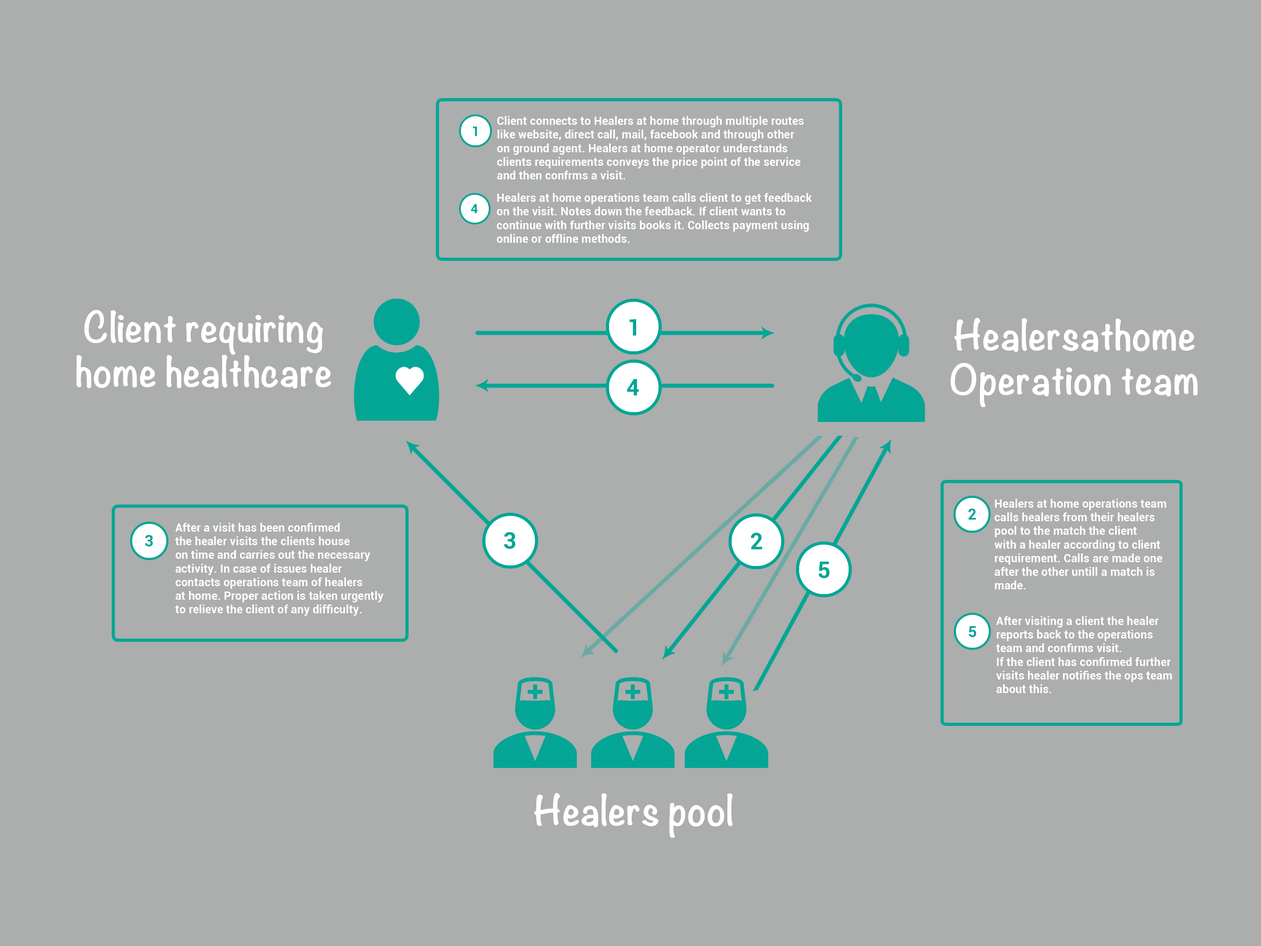
<style>
.page{position:relative;width:1261px;height:946px;background:#acadad}
.page>*{position:absolute;margin:0}
.t1{font:11.3px "Roboto-Bold";letter-spacing:0.01em;color:#ffffff}
.t2{font:37px "Noteworthy-Bold";letter-spacing:0.01em;color:#ffffff}
</style>
<div class="page">
<p class="t1" style="left:497px;top:116px;width:307px;height:63px">Client connects to Healers at home through multiple routes<br>like website, direct call, mail, facebook and through other <br>on ground agent. Healers at home operator understands <br>clients requirements conveys the price point of the service<br>and then confrms a visit.</p>
<p class="t1" style="left:497px;top:193px;width:315px;height:50px">Healers at home operations team calls client to get feedback <br>on the visit. Notes down the feedback. If client wants to <br>continue with further visits books it. Collects payment using <br>online or offline methods.</p>
<p class="t2" style="left:76px;top:310px;width:255px;height:78px;text-align:center">Client requiring<br>home healthcare</p>
<p class="t2" style="left:950px;top:318px;width:248px;height:89px;text-align:center">Healersathome<br>Operation team</p>
<p class="t1" style="left:994px;top:499px;width:172px;height:90px">Healers at home operations team<br>calls healers from their healers<br>pool to the match the client<br>with a healer according to client<br>requirement. Calls are made one<br>after the other untill a match is<br>made.</p>
<p class="t1" style="left:175px;top:523px;width:209px;height:93px">After a visit has been confirmed<br>the healer visits the clients house<br>on time and carries out the necessary<br>activity. In case of issues healer <br>contacts operations team of healers<br>at home. Proper action is taken urgently <br>to relieve the client of any difficulty.</p>
<p class="t1" style="left:996px;top:616px;width:176px;height:77px">After visiting a client the healer<br>reports back to the operations <br>team and confirms visit.<br>If the client has confirmed further<br>visits healer notifies the ops team<br>about this.</p>
<p class="t2" style="left:534px;top:793px;width:199px;height:45px">Healers pool</p>
</div>
